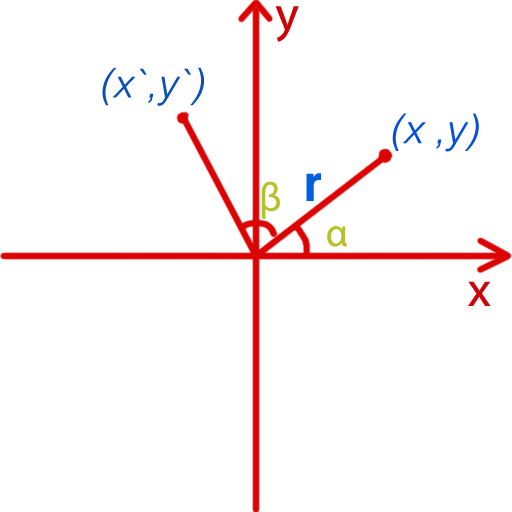
<style>
.page{position:relative;width:512px;height:512px;background:#ffffff}
.page>*{position:absolute;margin:0}
.t1{font:50px "MyriadPro-Regular";color:#ce0308}
.t2{font:40px "Helvetica-LightOblique";color:#0b50b6}
.t3{font:40px "Helvetica-LightOblique";color:#034fdc}
.t4{font:50px "HelveticaNeue-CondensedBold";color:#035fdc}
.t5{font:40px "MyriadPro-Regular";color:#b6c22b}
</style>
<div class="page">
<p class="t1" style="left:275px;top:6px;width:24px;height:36px">y</p>
<p class="t2" style="left:102px;top:67px;width:102px;height:39px">(x`,y`)</p>
<p class="t3" style="left:392px;top:113px;width:87px;height:39px">(x ,y)</p>
<p class="t4" style="left:306px;top:173px;width:15px;height:28px">r</p>
<p class="t5" style="left:261px;top:181px;width:19px;height:38px">β</p>
<p class="t5" style="left:327px;top:226px;width:20px;height:21px">α</p>
<p class="t1" style="left:468px;top:281px;width:23px;height:25px">x</p>
</div>
